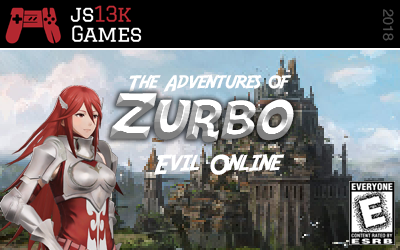
<style>
.page{position:relative;width:400px;height:250px}
.page>*{position:absolute;margin:0}
.t1{font:13.9px "Helvetica";color:#4b4b4b}
.t2{font:22.3px "Adventure";color:#ffffff}
.t3{font:36.6px "HeroesLegend"}
.t4{font:27px "Adventure";color:#ffffff}
</style>
<div class="page">
<p class="t1" style="left:382px;top:9px;width:12px;height:32px;rotate:90deg">2018</p>
<p class="t2" style="left:129px;top:74px;width:163px;height:18px">The Adventures of</p>
<p class="t3" style="left:109px;top:93px;width:185px;height:50px">Zurbo</p>
<p class="t4" style="left:154px;top:154px;width:131px;height:21px">Evil Online</p>
</div>
